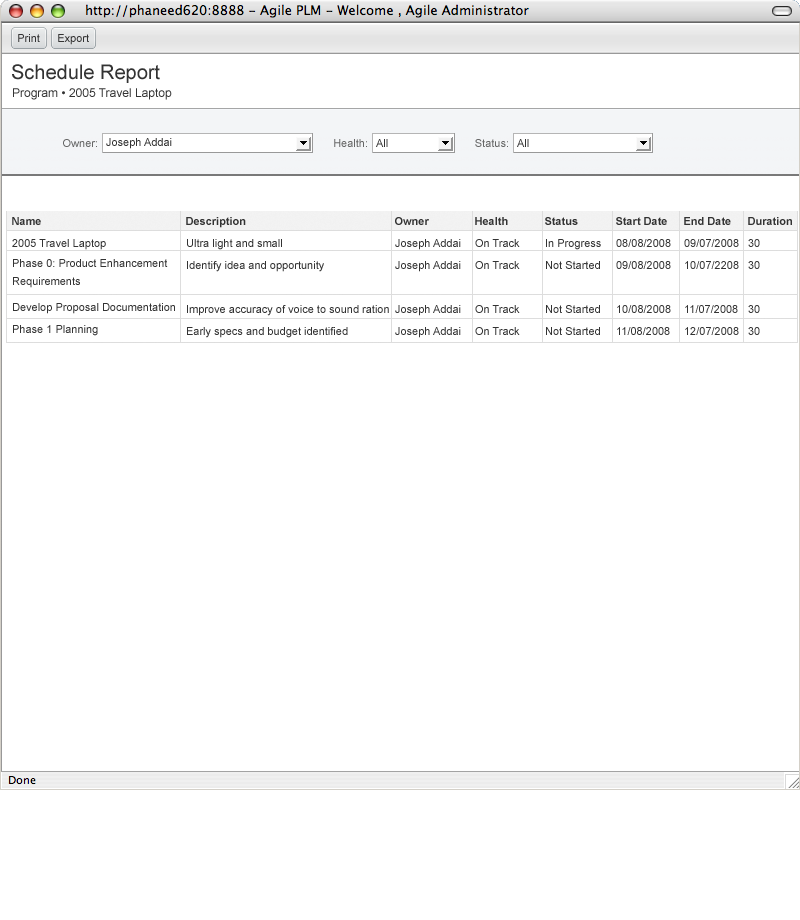
<style>
.page{position:relative;width:800px;height:920px;background:#ffffff}
.page>*{position:absolute;margin:0}
.t1{font:11px "ArialMT";color:#333333}
.t2{font:20px "ArialMT";color:#333333}
.t3{font:12px "ArialMT";color:#333333}
.t4{font:11px "ArialMT";color:#666666}
.t5{font:11px "Arial-BoldMT";color:#333333}
.t6{font:11px/26px "ArialMT";color:#333333}
.t7{font:11px/22px "ArialMT";color:#333333}
.t8{font:11px/20px "ArialMT";color:#333333}
.t9{font:11px/18px "ArialMT";color:#333333}
</style>
<div class="page">
<p class="t1" style="left:18px;top:34px;width:22px;height:8px">Print</p>
<p class="t1" style="left:58px;top:34px;width:31px;height:11px">Export</p>
<p class="t2" style="left:12px;top:64px;width:148px;height:19px">Schedule Report</p>
<p class="t3" style="left:13px;top:88px;width:159px;height:12px">Program • 2005 Travel Laptop</p>
<p class="t4" style="left:63px;top:139px;width:34px;height:8px">Owner:</p>
<p class="t1" style="left:106px;top:138px;width:66px;height:11px">Joseph Addai</p>
<p class="t4" style="left:334px;top:139px;width:33px;height:8px">Health:</p>
<p class="t1" style="left:376px;top:139px;width:12px;height:8px">All</p>
<p class="t4" style="left:475px;top:139px;width:33px;height:8px">Status:</p>
<p class="t1" style="left:517px;top:139px;width:12px;height:8px">All</p>
<p class="t5" style="left:12px;top:217px;width:29px;height:8px">Name</p>
<p class="t5" style="left:186px;top:217px;width:60px;height:11px">Description</p>
<p class="t5" style="left:395px;top:217px;width:34px;height:8px">Owner</p>
<p class="t5" style="left:475px;top:217px;width:33px;height:8px">Health</p>
<p class="t5" style="left:545px;top:217px;width:33px;height:8px">Status</p>
<p class="t5" style="left:616px;top:217px;width:51px;height:8px">Start Date</p>
<p class="t5" style="left:684px;top:217px;width:47px;height:8px">End Date</p>
<p class="t5" style="left:748px;top:217px;width:44px;height:8px">Duration</p>
<p class="t6" style="left:12px;top:239px;width:163px;height:97px"><span class="t7">2005 Travel Laptop<br></span><span class="t8">Phase 0: Product Enhancement<br></span><span class="t9">Requirements<br></span>Develop Proposal Documentation<br><span class="t7">Phase 1 Planning</span></p>
<p class="t7" style="left:187px;top:239px;width:202px;height:99px">Ultra light and small<br>Identify idea and opportunity<br><br>Improve accuracy of voice to sound ration<br>Early specs and budget identified</p>
<p class="t7" style="left:395px;top:239px;width:66px;height:99px">Joseph Addai<br>Joseph Addai<br><br>Joseph Addai<br>Joseph Addai</p>
<p class="t7" style="left:475px;top:239px;width:45px;height:96px">On Track<br>On Track<br><br>On Track<br>On Track</p>
<p class="t7" style="left:546px;top:239px;width:55px;height:96px">In Progress<br>Not Started<br><br>Not Started<br>Not Started</p>
<p class="t7" style="left:616px;top:239px;width:55px;height:96px">08/08/2008<br>09/08/2008<br><br>10/08/2008<br>11/08/2008</p>
<p class="t7" style="left:684px;top:239px;width:55px;height:96px">09/07/2008<br>10/07/2208<br><br>11/07/2008<br>12/07/2008</p>
<p class="t7" style="left:748px;top:239px;width:12px;height:96px">30<br>30<br><br>30<br>30</p>
</div>
